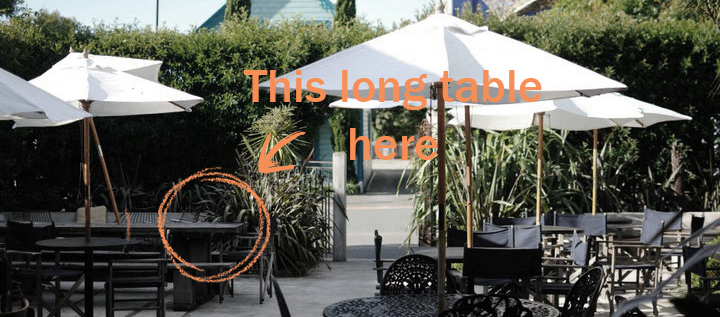
<style>
.page{position:relative;width:720px;height:317px}
.page>*{position:absolute;margin:0}
.t1{font:48px "FranklinGothic-Medium";color:#f68e56}
</style>
<div class="page">
<p class="t1" style="left:244px;top:70px;width:298px;height:90px;text-align:center">This long table here</p>
</div>
